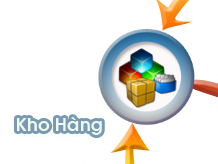
<style>
.page{position:relative;width:218px;height:164px;background:#ffffff}
.page>*{position:absolute;margin:0}
.t1{font:18px "VNI-Avo-Bold";color:#eef9ef}
</style>
<div class="page">
<p class="t1" style="left:17px;top:117px;width:85px;height:18px">Kho Haøng</p>
</div>
